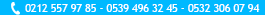
<style>
.page{position:relative;width:265px;height:15px;background:#00b9ff}
.page>*{position:absolute;margin:0}
.t1{font:10.7px "TrebuchetMS";color:#ffffff}
</style>
<div class="page">
<p class="t1" style="left:25px;top:4px;width:235px;height:8px">0212 557 97 85 - 0539 496 32 45 - 0532 306 07 94</p>
</div>
